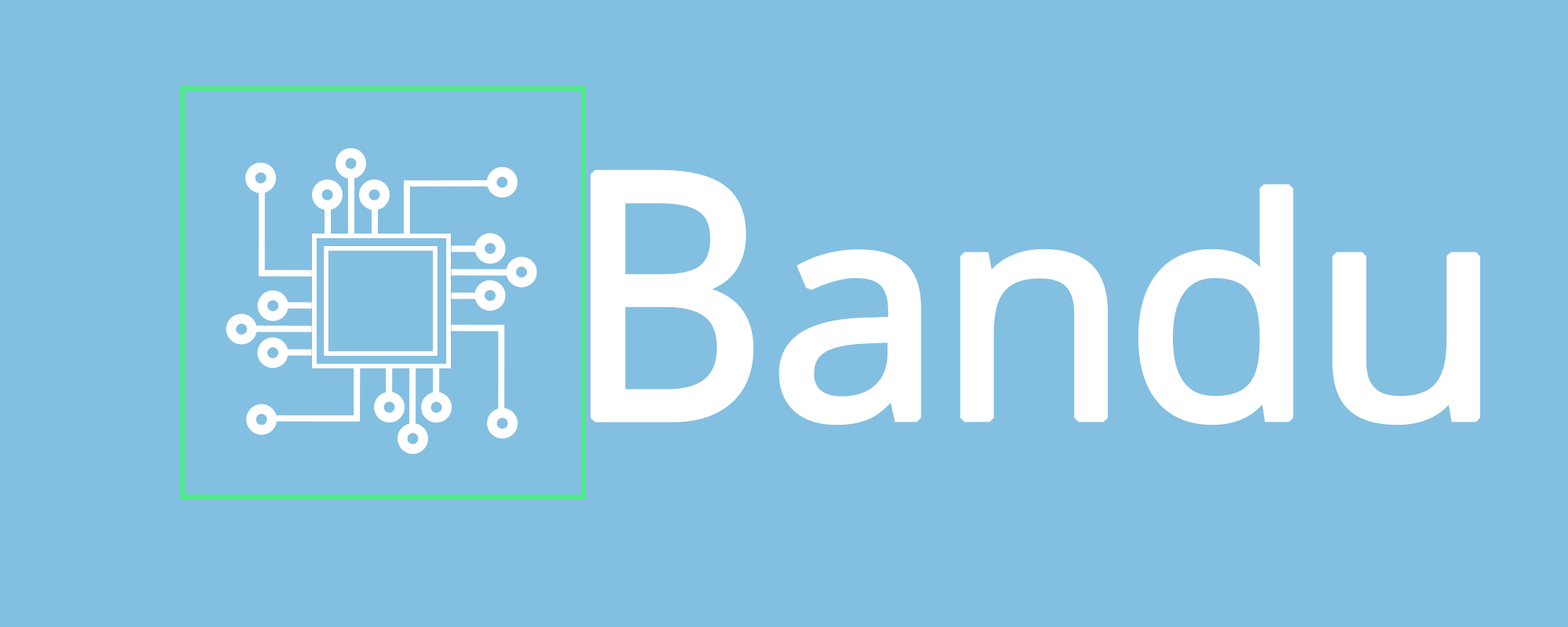
<style>
.page{position:relative;width:1568px;height:627px;background:#83bfe1}
.page>*{position:absolute;margin:0}
.t1{font:301.8px "OpenSansHebrew-Regular";letter-spacing:-0.04em;color:#ffffff;font-weight:bold;scale:1.03 1}
.t2{font:340.7px "OpenSansHebrew-Regular";letter-spacing:-0.02em;color:#ffffff;font-weight:bold;scale:0.91 1}
</style>
<div class="page">
<p class="t1" style="left:590px;top:169px;width:890px;height:257px"><span class="t2">B</span>andu</p>
</div>
